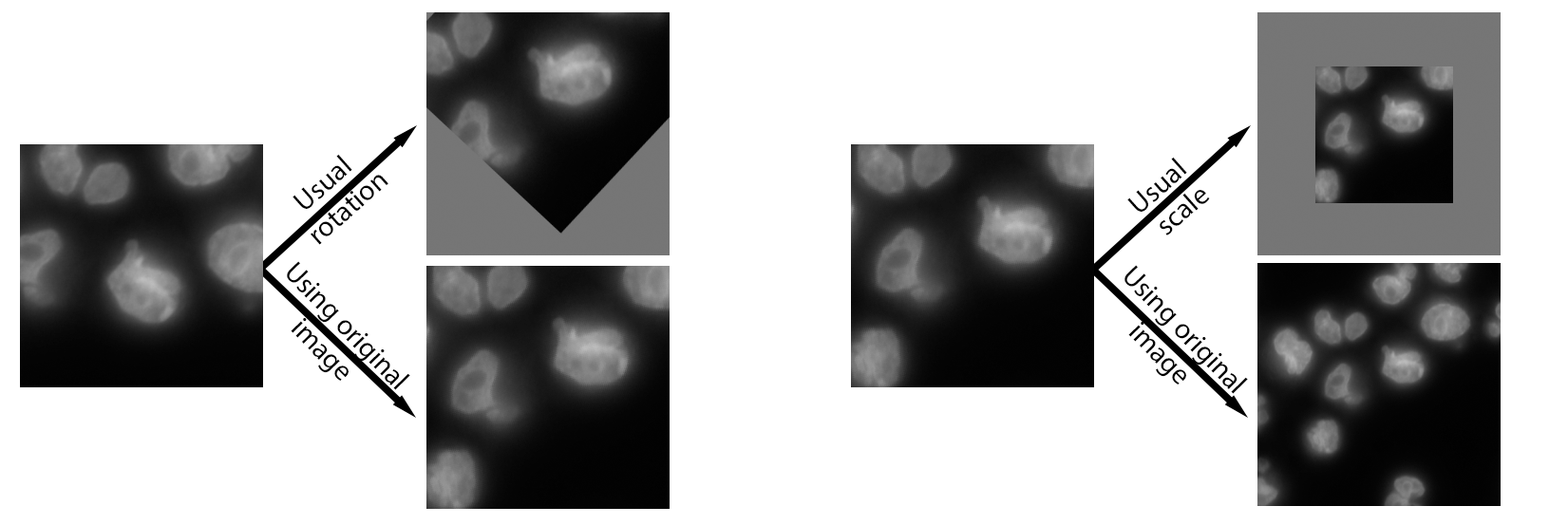
<style>
.page{position:relative;width:1568px;height:525px;background:#ffffff}
.page>*{position:absolute;margin:0}
.t1{font:28.5px "MyriadPro-Regular";color:#000000}
</style>
<div class="page">
<p class="t1" style="left:293px;top:154px;width:95px;height:91px;text-align:center;rotate:-42deg">Usual<br> rotation</p>
<p class="t1" style="left:1127px;top:157px;width:83px;height:79px;text-align:center;rotate:-42deg">Usual<br> scale</p>
<p class="t1" style="left:287px;top:261px;width:123px;height:129px;rotate:46deg">Using original image</p>
<p class="t1" style="left:1124px;top:265px;width:124px;height:129px;rotate:46deg">Using original image</p>
</div>
